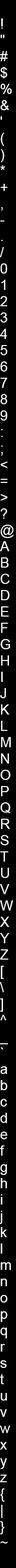
<style>
.page{position:relative;width:16px;height:1568px;background:#000000}
.page>*{position:absolute;margin:0}
.t1{font:14.5px/16.3px "ArialMT";color:#ffffff}
</style>
<div class="page">
<p class="t1" style="left:0px;top:18px;width:14px;height:1526px">!<br>"<br>#<br>$<br>%<br>&amp;<br>'<br>(<br>)<br>*<br>+<br>,<br>-<br>.<br>/<br>0<br>1<br>2<br>3<br>4<br>5<br>6<br>7<br>8<br>9<br>:<br>;<br>&lt;<br>=<br>&gt;<br>?<br>@<br>A<br>B<br>C<br>D<br>E<br>F<br>G<br>H<br>I<br>J<br>K<br>L<br>M<br>N<br>O<br>P<br>Q<br>R<br>S<br>T<br>U<br>V<br>W<br>X<br>Y<br>Z<br>[<br>\<br>]<br>^<br>_<br>`<br>a<br>b<br>c<br>d<br>e<br>f<br>g<br>h<br>i<br>j<br>k<br>l<br>m<br>n<br>o<br>p<br>q<br>r<br>s<br>t<br>u<br>v<br>w<br>x<br>y<br>z<br>{<br>|<br>}<br>~</p>
</div>
